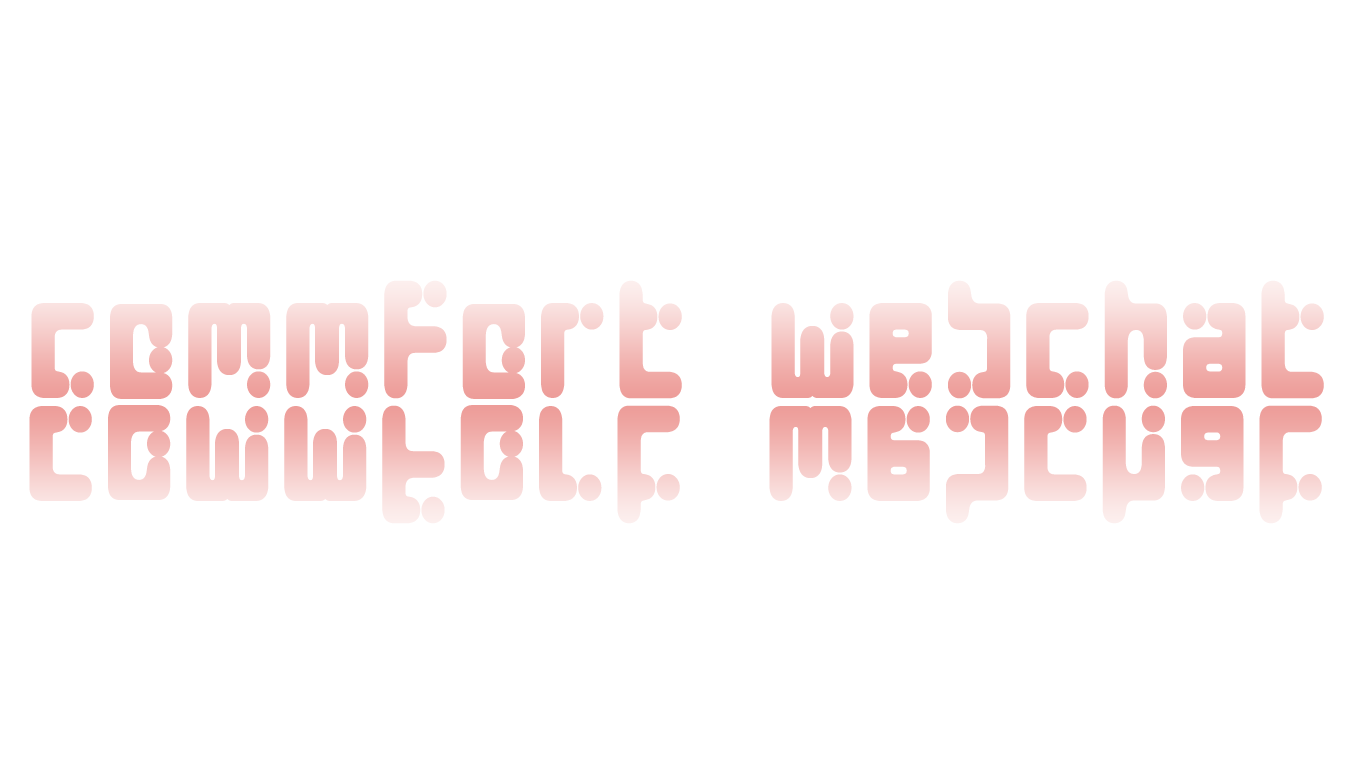
<style>
.page{position:relative;width:1366px;height:768px;background:#ffffff}
.page>*{position:absolute;margin:0}
.t1{font:136.7px "SeedsCyr-Medium";letter-spacing:0.1em;font-weight:bold;scale:0.86 1}
</style>
<div class="page">
<p class="t1" style="left:31px;top:280px;width:1293px;height:119px">CommFort Webchat</p>
</div>
